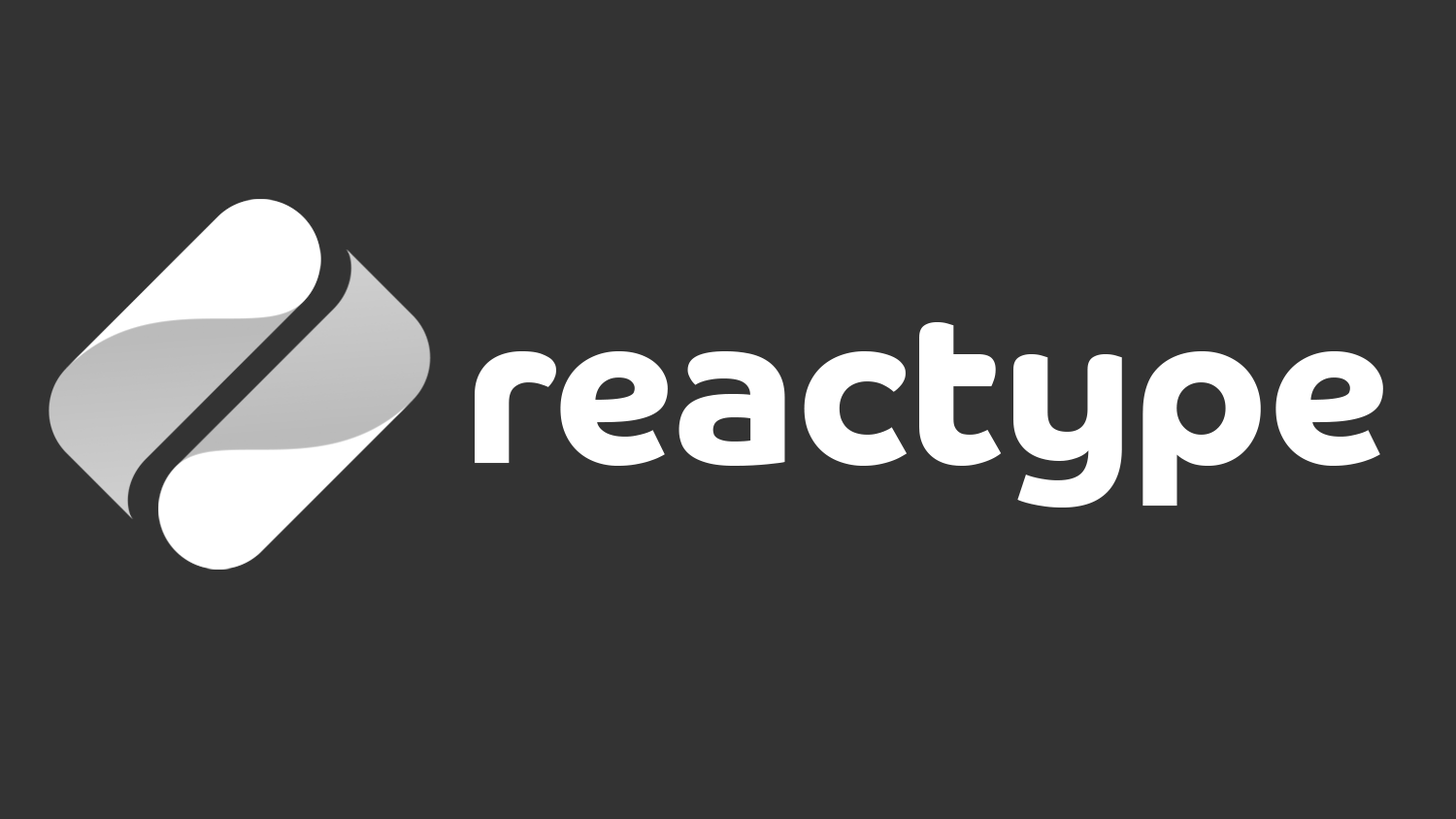
<style>
.page{position:relative;width:1456px;height:819px;background:#333333}
.page>*{position:absolute;margin:0}
.t1{font:212.8px "CoHeadline-Bold";color:#ffffff}
</style>
<div class="page">
<p class="t1" style="left:475px;top:322px;width:908px;height:186px">reactype</p>
</div>
